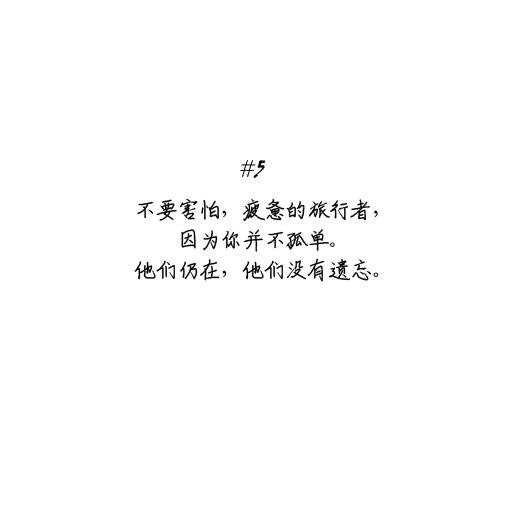
<style>
.page{position:relative;width:512px;height:512px;background:#ffffff}
.page>*{position:absolute;margin:0}
.t1{font:24px/30px "ShouShuti";letter-spacing:-0.1em;color:#000000}
</style>
<div class="page">
<p class="t1" style="left:134px;top:198px;width:245px;height:84px;text-align:center">不要害怕，疲惫的旅行者，<br>因为你并不孤单。<br>他们仍在，他们没有遗忘。</p>
</div>
